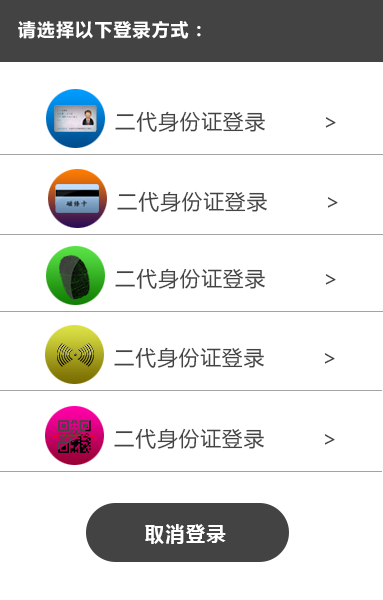
<style>
.page{position:relative;width:383px;height:600px;background:#ffffff}
.page>*{position:absolute;margin:0}
.t1{font:18px "MicrosoftYaHei-Bold";letter-spacing:0.075em;color:#ffffff}
.t2{font:20.7px "MicrosoftYaHei";letter-spacing:0.05em;color:#434343}
.t3{font:19.6px "MicrosoftYaHei-Bold";letter-spacing:0.075em;color:#ffffff}
</style>
<div class="page">
<p class="t1" style="left:18px;top:21px;width:183px;height:18px">请选择以下登录方式：</p>
<p class="t2" style="left:115px;top:111px;width:221px;height:21px">二代身份证登录        &gt;</p>
<p class="t2" style="left:117px;top:191px;width:221px;height:21px">二代身份证登录        &gt;</p>
<p class="t2" style="left:115px;top:268px;width:221px;height:21px">二代身份证登录        &gt;</p>
<p class="t2" style="left:114px;top:347px;width:221px;height:21px">二代身份证登录        &gt;</p>
<p class="t2" style="left:114px;top:428px;width:221px;height:21px">二代身份证登录        &gt;</p>
<p class="t3" style="left:145px;top:524px;width:81px;height:20px">取消登录</p>
</div>
